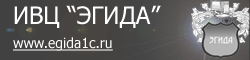
<style>
.page{position:relative;width:250px;height:60px}
.page>*{position:absolute;margin:0}
.t1{font:24px "Tahoma";color:#ffffff}
.t2{font:14px "Tahoma";color:#ffffff;text-decoration:underline}
</style>
<div class="page">
<p class="t1" style="left:14px;top:5px;width:147px;height:23px">ИВЦ “ЭГИДА”</p>
<p class="t2" style="left:13px;top:37px;width:100px;height:14px">www.egida1c.ru</p>
</div>
